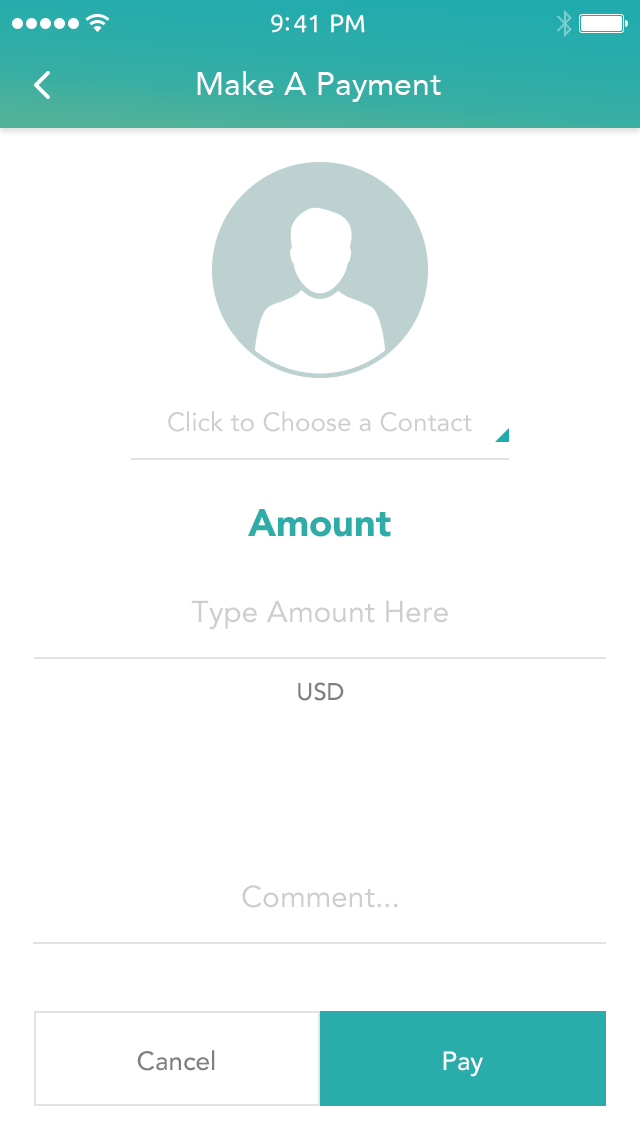
<style>
.page{position:relative;width:640px;height:1136px;background:#ffffff}
.page>*{position:absolute;margin:0}
.t1{font:25px "Ubuntu";color:#ffffff}
.t2{font:32px "Avenir-Roman";color:#ffffff}
.t3{font:26px "Avenir-Roman";color:#cecece}
.t4{font:38px "Avenir-Black";color:#2eada8}
.t5{font:30px/78px "Avenir-Roman";color:#cecece}
.t6{font:24px/78px "Avenir-Medium";color:#7f7f7f}
.t7{font:30px "Avenir-Roman";color:#cecece}
.t8{font:26px "Avenir-Medium";color:#7e7f7f}
.t9{font:26px "Avenir-Medium";color:#ffffff}
</style>
<div class="page">
<p class="t1" style="left:271px;top:14px;width:94px;height:19px">9:41 PM</p>
<p class="t2" style="left:197px;top:71px;width:244px;height:31px">Make A Payment</p>
<p class="t3" style="left:168px;top:411px;width:304px;height:21px">Click to Choose a Contact</p>
<p class="t4" style="left:248px;top:509px;width:143px;height:28px">Amount</p>
<p class="t5" style="left:191px;top:600px;width:257px;height:101px;text-align:center">Type Amount Here<br><span class="t6">USD</span></p>
<p class="t7" style="left:242px;top:885px;width:156px;height:23px">Comment...</p>
<p class="t8" style="left:137px;top:1050px;width:78px;height:21px">Cancel</p>
<p class="t9" style="left:443px;top:1051px;width:40px;height:26px">Pay</p>
</div>
